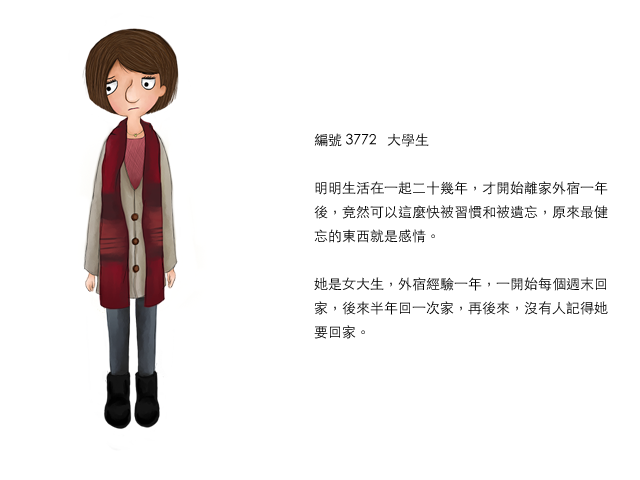
<style>
.page{position:relative;width:640px;height:480px;background:#ffffff}
.page>*{position:absolute;margin:0}
.t1{font:14px/24px "STHeitiTC-Light";color:#000000}
</style>
<div class="page">
<p class="t1" style="left:314px;top:133px;width:294px;height:206px">編號 3772   大學生<br><br>明明生活在一起二十幾年，才開始離家外宿一年後，竟然可以這麼快被習慣和被遺忘，原來最健忘的東西就是感情。<br><br>她是女大生，外宿經驗一年，一開始每個週末回家，後來半年回一次家，再後來，沒有人記得她要回家。</p>
</div>
